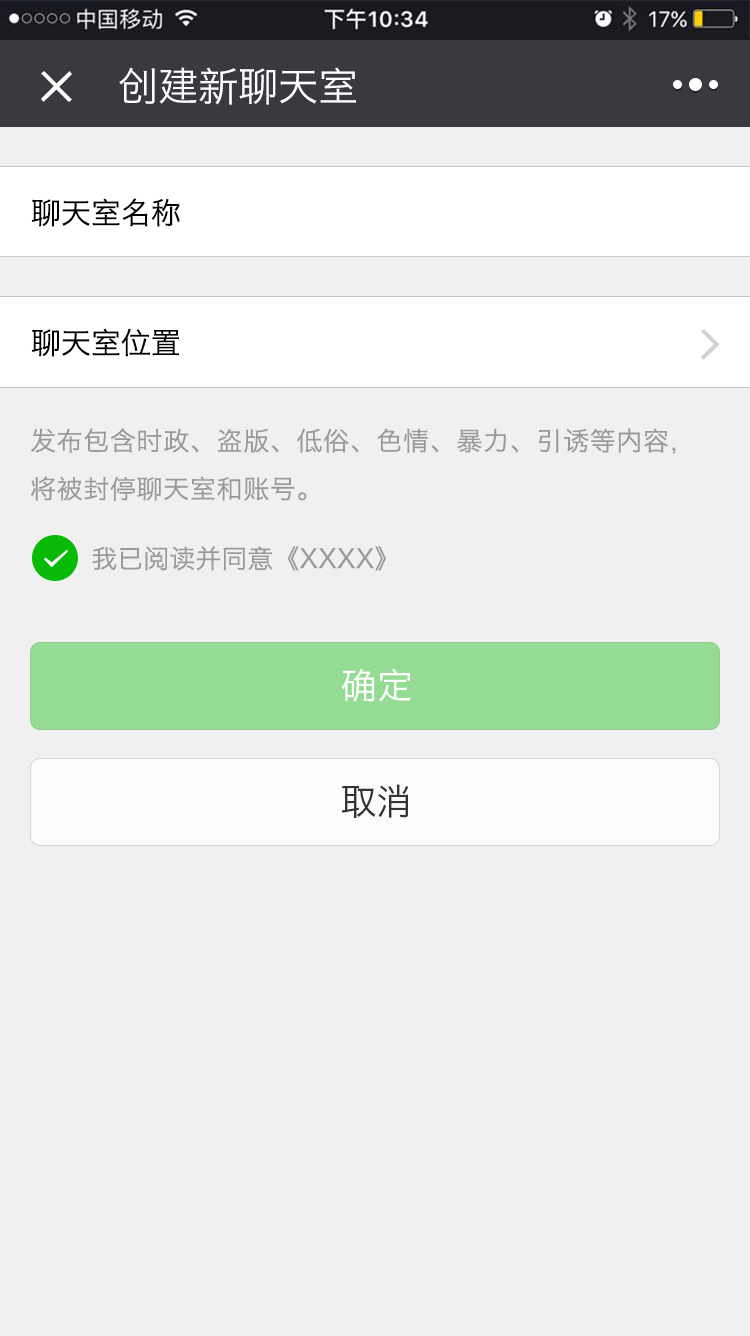
<style>
.page{position:relative;width:750px;height:1336px;background:#f0f0f0}
.page>*{position:absolute;margin:0}
.t1{font:40px "HiraginoSansGB-W3";color:#ffffff}
.t2{font:30px/130px "HiraginoSansGB-W3";color:#000000}
.t3{font:26px/48px "HiraginoSansGB-W3";letter-spacing:0.025em;color:#999999}
.t4{font:26px "HiraginoSansGB-W3";color:#999999}
.t5{font:36px "HiraginoSansGB-W3";color:#ffffff}
.t6{font:36px "HiraginoSansGB-W3";color:#333333}
</style>
<div class="page">
<p class="t1" style="left:119px;top:67px;width:237px;height:38px">创建新聊天室</p>
<p class="t2" style="left:31px;top:198px;width:149px;height:159px">聊天室名称<br>聊天室位置</p>
<p class="t3" style="left:30px;top:428px;width:646px;height:73px">发布包含时政、盗版、低俗、色情、暴力、引诱等内容，<br>将被封停聊天室和账号。</p>
<p class="t4" style="left:92px;top:546px;width:294px;height:25px">我已阅读并同意《XXXX》</p>
<p class="t5" style="left:341px;top:668px;width:70px;height:34px">确定</p>
<p class="t6" style="left:341px;top:784px;width:68px;height:34px">取消</p>
</div>
